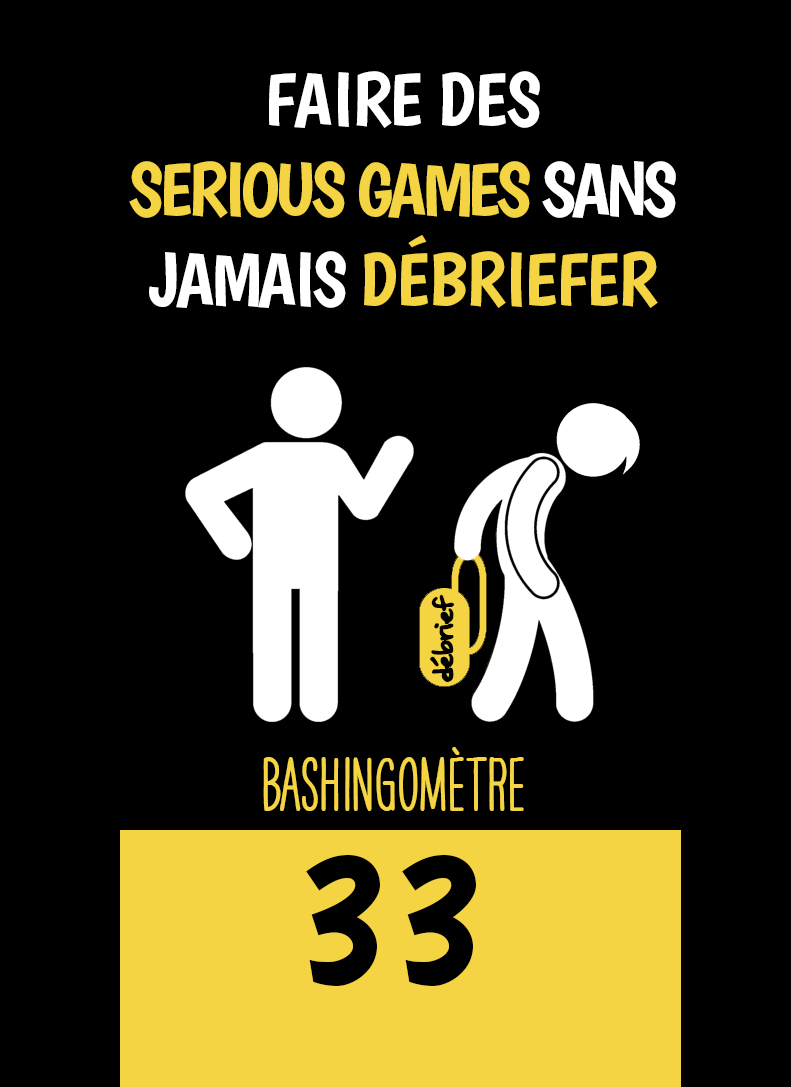
<style>
.page{position:relative;width:791px;height:1087px;background:#000000}
.page>*{position:absolute;margin:0}
.t1{font:75px "Boogaloo-Regular";letter-spacing:-0.06em;color:#f4d443}
.t2{font:75px "Boogaloo-Regular";letter-spacing:-0.02em;color:#ffffff}
.t3{font:75px "Boogaloo-Regular";letter-spacing:-0.06em;color:#ffffff}
.t4{font:75px "Boogaloo-Regular";letter-spacing:-0.04em;color:#ffffff}
.t5{font:75px "Boogaloo-Regular";letter-spacing:-0.02em;color:#f4d443}
.t6{font:33.3px "OakStreetW01-Regular";letter-spacing:-0.04em;color:#000000}
.t7{font:66.7px "HAVEANICEDAYTallW04-Bold";color:#f4d443}
.t8{font:200px "Boogaloo-Regular";color:#000000}
</style>
<div class="page">
<p class="t1" style="left:129px;top:71px;width:547px;height:237px;text-align:center"><span class="t2">FAIRE DES<br></span>SERIOUS GAMES<span class="t3"> SANS<br></span><span class="t4">JAMAIS </span><span class="t5">DÉBRIEFER</span></p>
<p class="t6" style="left:430px;top:594px;width:24px;height:88px;rotate:-90deg">débrief</p>
<p class="t7" style="left:263px;top:747px;width:261px;height:64px">BASHINgomètre</p>
<p class="t8" style="left:306px;top:855px;width:170px;height:131px">33</p>
</div>
